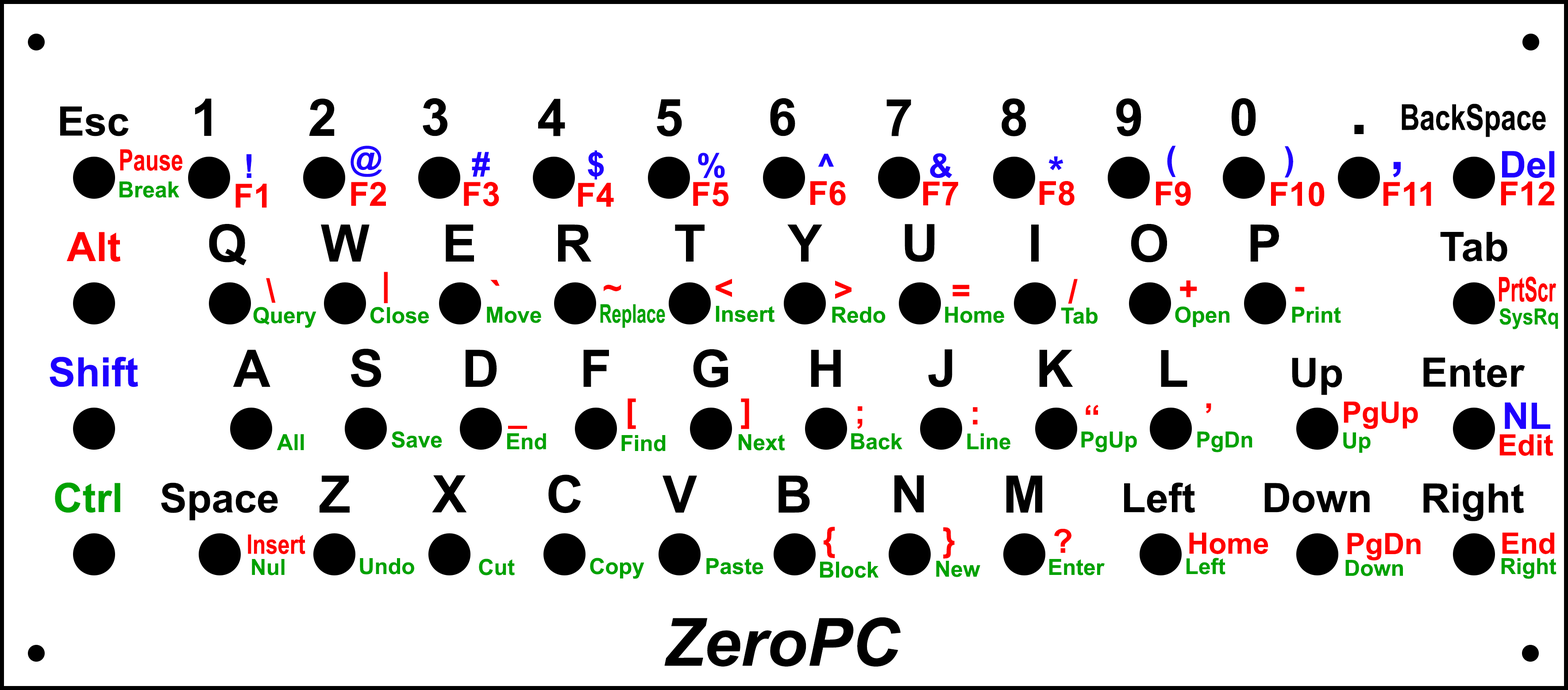
<style>
.page{position:relative;width:1568px;height:690px;background:#ffffff}
.page>*{position:absolute;margin:0}
.t1{font:51.6px "Arial-BoldMT";color:#000000}
.t2{font:40.6px "Arial-BoldMT";color:#000000}
.t3{font:35.9px "Arial-BoldMT";color:#000000;scale:0.77 1}
.t4{font:66.4px "Arial-BoldMT";color:#000000}
.t5{font:29.4px "Arial-BoldMT";color:#ff0000;scale:0.75 1}
.t6{font:33.2px "Arial-BoldMT";color:#1e00ff}
.t7{font:40.6px "Arial-BoldMT";color:#1e00ff}
.t8{font:51.6px "Arial-BoldMT";color:#1e00ff}
.t9{font:36.9px "Arial-BoldMT";color:#1e00ff}
.t10{font:22.1px "Arial-BoldMT";color:#00a200}
.t11{font:33.2px "Arial-BoldMT";color:#ff0000}
.t12{font:40.6px "Arial-BoldMT";color:#ff0000}
.t13{font:34.1px "Arial-BoldMT";color:#ff0000;scale:0.57 1}
.t14{font:25.8px "Arial-BoldMT";color:#00a200;scale:0.67 1}
.t15{font:22.2px "Arial-BoldMT";color:#00a200;scale:0.87 1}
.t16{font:29.5px "Arial-BoldMT";color:#ff0000}
.t17{font:40.6px "Arial-BoldMT";color:#00a200}
.t18{font:26.9px "Arial-BoldMT";color:#ff0000;scale:0.8 1}
.t19{font:66.4px "Arial-BoldItalicMT";color:#000000}
</style>
<div class="page">
<p class="t1" style="left:195px;top:98px;width:17px;height:38px">1</p>
<p class="t1" style="left:309px;top:98px;width:26px;height:38px">2</p>
<p class="t1" style="left:423px;top:98px;width:24px;height:38px">3</p>
<p class="t1" style="left:538px;top:99px;width:27px;height:37px">4</p>
<p class="t1" style="left:657px;top:99px;width:25px;height:38px">5</p>
<p class="t1" style="left:770px;top:98px;width:25px;height:38px">6</p>
<p class="t1" style="left:886px;top:99px;width:25px;height:37px">7</p>
<p class="t1" style="left:1002px;top:98px;width:24px;height:38px">8</p>
<p class="t1" style="left:1116px;top:98px;width:25px;height:38px">9</p>
<p class="t1" style="left:1231px;top:98px;width:25px;height:38px">0</p>
<p class="t2" style="left:60px;top:106px;width:69px;height:30px">Esc</p>
<p class="t3" style="left:1402px;top:104px;width:144px;height:33px">BackSpace</p>
<p class="t4" style="left:1354px;top:125px;width:10px;height:9px">.</p>
<p class="t5" style="left:120px;top:149px;width:63px;height:22px">Pause</p>
<p class="t6" style="left:351px;top:146px;width:31px;height:31px">@</p>
<p class="t6" style="left:1167px;top:146px;width:9px;height:31px">(</p>
<p class="t6" style="left:1285px;top:146px;width:8px;height:31px">)</p>
<p class="t6" style="left:247px;top:154px;width:5px;height:24px">!</p>
<p class="t6" style="left:472px;top:152px;width:18px;height:25px">#</p>
<p class="t6" style="left:588px;top:150px;width:16px;height:30px">$</p>
<p class="t6" style="left:698px;top:153px;width:27px;height:25px">%</p>
<p class="t6" style="left:818px;top:154px;width:16px;height:13px">^</p>
<p class="t6" style="left:930px;top:153px;width:22px;height:25px">&amp;</p>
<p class="t7" style="left:1048px;top:156px;width:15px;height:14px">*</p>
<p class="t8" style="left:1393px;top:162px;width:8px;height:15px">,</p>
<p class="t9" style="left:1502px;top:151px;width:53px;height:27px">Del</p>
<p class="t10" style="left:119px;top:181px;width:60px;height:17px">Break</p>
<p class="t11" style="left:235px;top:184px;width:32px;height:24px">F1</p>
<p class="t11" style="left:351px;top:182px;width:35px;height:24px">F2</p>
<p class="t11" style="left:464px;top:182px;width:35px;height:24px">F3</p>
<p class="t11" style="left:578px;top:183px;width:36px;height:24px">F4</p>
<p class="t11" style="left:693px;top:182px;width:36px;height:24px">F5</p>
<p class="t11" style="left:810px;top:181px;width:36px;height:24px">F6</p>
<p class="t11" style="left:923px;top:181px;width:35px;height:24px">F7</p>
<p class="t11" style="left:1040px;top:181px;width:35px;height:24px">F8</p>
<p class="t11" style="left:1156px;top:181px;width:35px;height:25px">F9</p>
<p class="t11" style="left:1271px;top:182px;width:54px;height:24px">F10</p>
<p class="t11" style="left:1383px;top:182px;width:48px;height:24px">F11</p>
<p class="t11" style="left:1501px;top:181px;width:53px;height:24px">F12</p>
<p class="t12" style="left:66px;top:232px;width:54px;height:30px">Alt</p>
<p class="t1" style="left:209px;top:224px;width:38px;height:42px">Q</p>
<p class="t1" style="left:321px;top:224px;width:49px;height:38px">W</p>
<p class="t1" style="left:446px;top:224px;width:28px;height:38px">E</p>
<p class="t1" style="left:558px;top:224px;width:34px;height:38px">R</p>
<p class="t1" style="left:675px;top:224px;width:30px;height:38px">T</p>
<p class="t1" style="left:787px;top:224px;width:35px;height:38px">Y</p>
<p class="t1" style="left:905px;top:224px;width:30px;height:38px">U</p>
<p class="t1" style="left:1031px;top:224px;width:8px;height:38px">I</p>
<p class="t1" style="left:1131px;top:224px;width:36px;height:38px">O</p>
<p class="t1" style="left:1250px;top:224px;width:29px;height:38px">P</p>
<p class="t2" style="left:1440px;top:232px;width:67px;height:30px">Tab</p>
<p class="t11" style="left:266px;top:278px;width:10px;height:25px">\</p>
<p class="t11" style="left:384px;top:272px;width:4px;height:31px">|</p>
<p class="t12" style="left:490px;top:280px;width:10px;height:6px">`</p>
<p class="t11" style="left:716px;top:279px;width:16px;height:18px">&lt;</p>
<p class="t11" style="left:835px;top:281px;width:16px;height:18px">&gt;</p>
<p class="t11" style="left:1068px;top:279px;width:10px;height:25px">/</p>
<p class="t11" style="left:1180px;top:280px;width:17px;height:17px">+</p>
<p class="t13" style="left:1499px;top:276px;width:57px;height:26px">PrtScr</p>
<p class="t11" style="left:604px;top:285px;width:17px;height:6px">~</p>
<p class="t11" style="left:952px;top:285px;width:18px;height:12px">=</p>
<p class="t11" style="left:1295px;top:287px;width:10px;height:5px">-</p>
<p class="t14" style="left:600px;top:304px;width:65px;height:24px">Replace</p>
<p class="t10" style="left:716px;top:306px;width:59px;height:16px">Insert</p>
<p class="t10" style="left:253px;top:307px;width:63px;height:21px">Query</p>
<p class="t10" style="left:370px;top:307px;width:59px;height:17px">Close</p>
<p class="t10" style="left:487px;top:307px;width:54px;height:16px">Move</p>
<p class="t10" style="left:832px;top:307px;width:54px;height:16px">Redo</p>
<p class="t10" style="left:945px;top:307px;width:59px;height:16px">Home</p>
<p class="t10" style="left:1061px;top:308px;width:37px;height:16px">Tab</p>
<p class="t10" style="left:1175px;top:306px;width:54px;height:21px">Open</p>
<p class="t10" style="left:1292px;top:307px;width:49px;height:16px">Print</p>
<p class="t15" style="left:1499px;top:308px;width:59px;height:21px">SysRq</p>
<p class="t1" style="left:233px;top:350px;width:37px;height:37px">A</p>
<p class="t1" style="left:351px;top:349px;width:30px;height:38px">S</p>
<p class="t1" style="left:466px;top:350px;width:31px;height:37px">D</p>
<p class="t1" style="left:583px;top:350px;width:26px;height:37px">F</p>
<p class="t1" style="left:693px;top:349px;width:35px;height:39px">G</p>
<p class="t1" style="left:811px;top:350px;width:30px;height:37px">H</p>
<p class="t1" style="left:928px;top:349px;width:24px;height:38px">J</p>
<p class="t1" style="left:1039px;top:350px;width:34px;height:37px">K</p>
<p class="t1" style="left:1161px;top:350px;width:26px;height:37px">L</p>
<p class="t7" style="left:50px;top:357px;width:88px;height:30px">Shift</p>
<p class="t2" style="left:1292px;top:358px;width:50px;height:37px">Up</p>
<p class="t2" style="left:1423px;top:358px;width:102px;height:29px">Enter</p>
<p class="t11" style="left:628px;top:398px;width:8px;height:31px">[</p>
<p class="t11" style="left:741px;top:398px;width:8px;height:31px">]</p>
<p class="t16" style="left:1344px;top:401px;width:74px;height:28px">PgUp</p>
<p class="t11" style="left:857px;top:406px;width:6px;height:23px">;</p>
<p class="t11" style="left:973px;top:407px;width:5px;height:17px">:</p>
<p class="t11" style="left:1086px;top:405px;width:12px;height:10px">“</p>
<p class="t11" style="left:1206px;top:403px;width:5px;height:10px">’</p>
<p class="t9" style="left:1505px;top:402px;width:45px;height:27px">NL</p>
<p class="t10" style="left:277px;top:434px;width:27px;height:16px">All</p>
<p class="t10" style="left:392px;top:431px;width:50px;height:17px">Save</p>
<p class="t10" style="left:507px;top:433px;width:39px;height:17px">End</p>
<p class="t10" style="left:621px;top:435px;width:45px;height:16px">Find</p>
<p class="t10" style="left:739px;top:434px;width:46px;height:17px">Next</p>
<p class="t10" style="left:851px;top:433px;width:51px;height:17px">Back</p>
<p class="t10" style="left:967px;top:433px;width:43px;height:17px">Line</p>
<p class="t10" style="left:1081px;top:431px;width:56px;height:21px">PgUp</p>
<p class="t10" style="left:1197px;top:431px;width:55px;height:21px">PgDn</p>
<p class="t10" style="left:1343px;top:432px;width:28px;height:21px">Up</p>
<p class="t16" style="left:1499px;top:434px;width:54px;height:22px">Edit</p>
<p class="t17" style="left:55px;top:482px;width:65px;height:31px">Ctrl</p>
<p class="t2" style="left:161px;top:482px;width:117px;height:38px">Space</p>
<p class="t1" style="left:320px;top:475px;width:30px;height:38px">Z</p>
<p class="t1" style="left:432px;top:475px;width:35px;height:37px">X</p>
<p class="t1" style="left:548px;top:474px;width:33px;height:39px">C</p>
<p class="t1" style="left:663px;top:475px;width:34px;height:38px">V</p>
<p class="t1" style="left:778px;top:475px;width:32px;height:38px">B</p>
<p class="t1" style="left:894px;top:475px;width:30px;height:37px">N</p>
<p class="t1" style="left:1006px;top:475px;width:36px;height:38px">M</p>
<p class="t2" style="left:1124px;top:482px;width:71px;height:31px">Left</p>
<p class="t2" style="left:1264px;top:483px;width:106px;height:30px">Down</p>
<p class="t2" style="left:1423px;top:483px;width:101px;height:38px">Right</p>
<p class="t11" style="left:824px;top:527px;width:11px;height:31px">{</p>
<p class="t11" style="left:943px;top:527px;width:12px;height:32px">}</p>
<p class="t11" style="left:1054px;top:528px;width:17px;height:25px">?</p>
<p class="t16" style="left:1189px;top:532px;width:79px;height:22px">Home</p>
<p class="t16" style="left:1347px;top:533px;width:74px;height:28px">PgDn</p>
<p class="t16" style="left:1502px;top:532px;width:52px;height:22px">End</p>
<p class="t18" style="left:248px;top:534px;width:57px;height:20px">Insert</p>
<p class="t10" style="left:590px;top:558px;width:54px;height:21px">Copy</p>
<p class="t10" style="left:1187px;top:558px;width:38px;height:16px">Left</p>
<p class="t10" style="left:252px;top:559px;width:33px;height:16px">Nul</p>
<p class="t10" style="left:360px;top:558px;width:54px;height:16px">Undo</p>
<p class="t10" style="left:479px;top:559px;width:36px;height:16px">Cut</p>
<p class="t10" style="left:706px;top:558px;width:57px;height:16px">Paste</p>
<p class="t10" style="left:820px;top:562px;width:59px;height:16px">Block</p>
<p class="t10" style="left:936px;top:561px;width:44px;height:16px">New</p>
<p class="t10" style="left:1049px;top:559px;width:56px;height:16px">Enter</p>
<p class="t10" style="left:1345px;top:560px;width:58px;height:16px">Down</p>
<p class="t10" style="left:1501px;top:558px;width:55px;height:21px">Right</p>
<p class="t19" style="left:664px;top:617px;width:237px;height:49px">ZeroPC</p>
</div>
